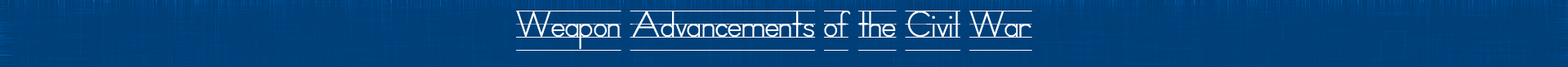
<style>
.page{position:relative;width:1568px;height:67px}
.page>*{position:absolute;margin:0}
.t1{font:40.4px "SchoolHousePrintedA";color:#ffffff}
</style>
<div class="page">
<p class="t1" style="left:515px;top:11px;width:517px;height:40px">Weapon Advancements of the Civil War</p>
</div>
